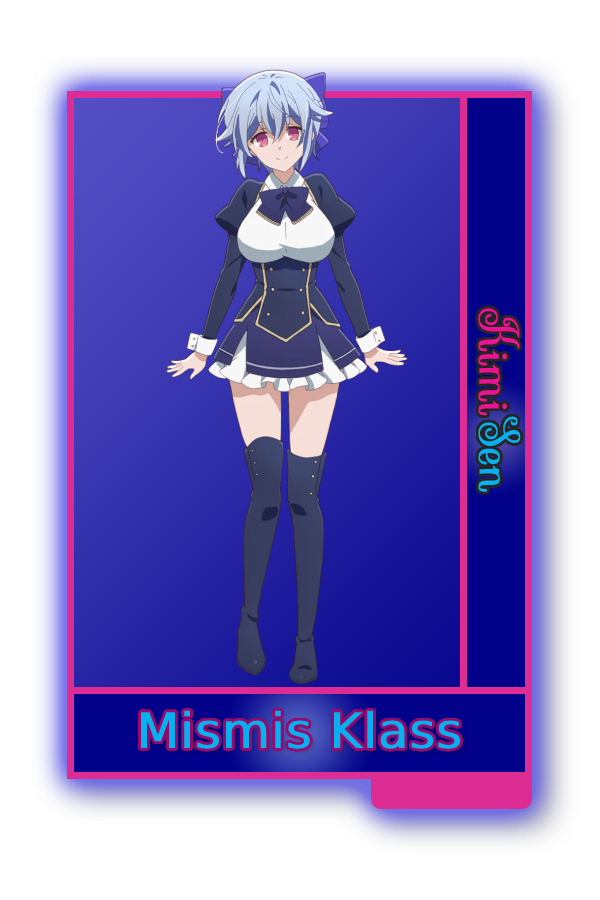
<style>
.page{position:relative;width:600px;height:900px;background:#ffffff}
.page>*{position:absolute;margin:0}
.t1{font:48.8px "Sevillana-Regular";color:#ee1294;font-weight:bold}
.t2{font:48.8px "Sevillana-Regular";color:#07b0ef;font-weight:bold}
.t3{font:49px "CoolveticaRg-Regular";color:#07b0ef;font-weight:bold}
</style>
<div class="page">
<p class="t1" style="left:478px;top:308px;width:43px;height:184px;rotate:90deg">Kimi<span class="t2">Sen</span></p>
<p class="t3" style="left:140px;top:710px;width:321px;height:39px">Mismis Klass</p>
</div>
